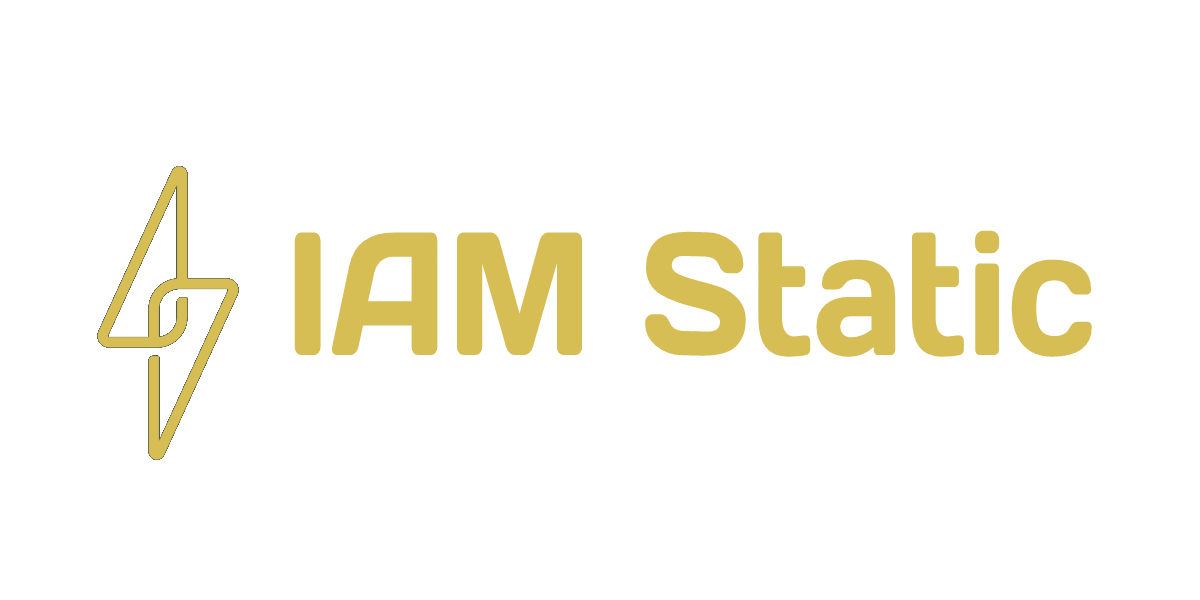
<style>
.page{position:relative;width:1200px;height:600px;background:#ffffff}
.page>*{position:absolute;margin:0}
.t1{font:175px "DaysOne-Regular";color:#d6bd54;scale:0.8 1}
</style>
<div class="page">
<p class="t1" style="left:294px;top:230px;width:798px;height:127px">IAM Static</p>
</div>
